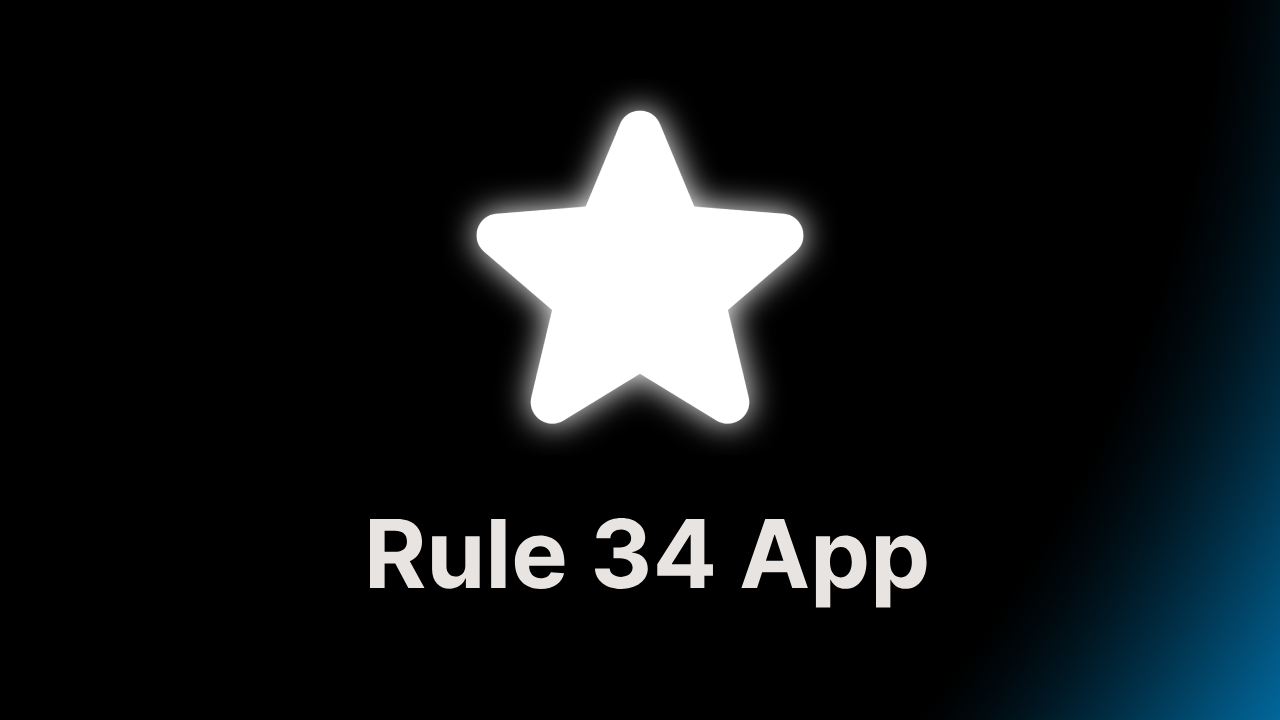
<style>
.page{position:relative;width:1280px;height:720px;background:#000000}
.page>*{position:absolute;margin:0}
.t1{font:95px "Inter-Bold";color:#e8e8e8}
</style>
<div class="page">
<p class="t1" style="left:370px;top:517px;width:557px;height:91px">Rule 34 App</p>
</div>
